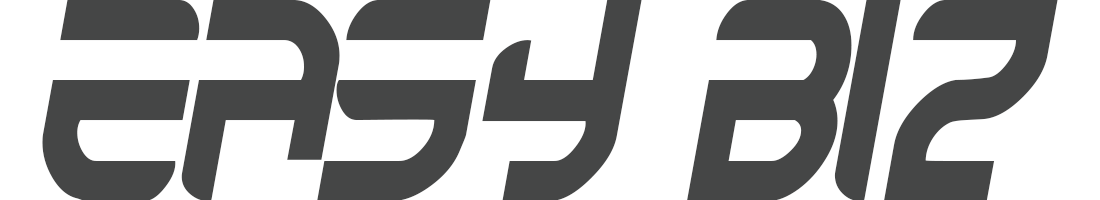
<style>
.page{position:relative;width:1100px;height:200px;background:#ffffff}
.page>*{position:absolute;margin:0}
.t1{font:285px "Autobahn";letter-spacing:-0.06em;color:#454646;font-variant:small-caps;scale:0.86 1}
</style>
<div class="page">
<p class="t1" style="left:42px;top:0px;width:1016px;height:201px">easy  biz</p>
</div>
